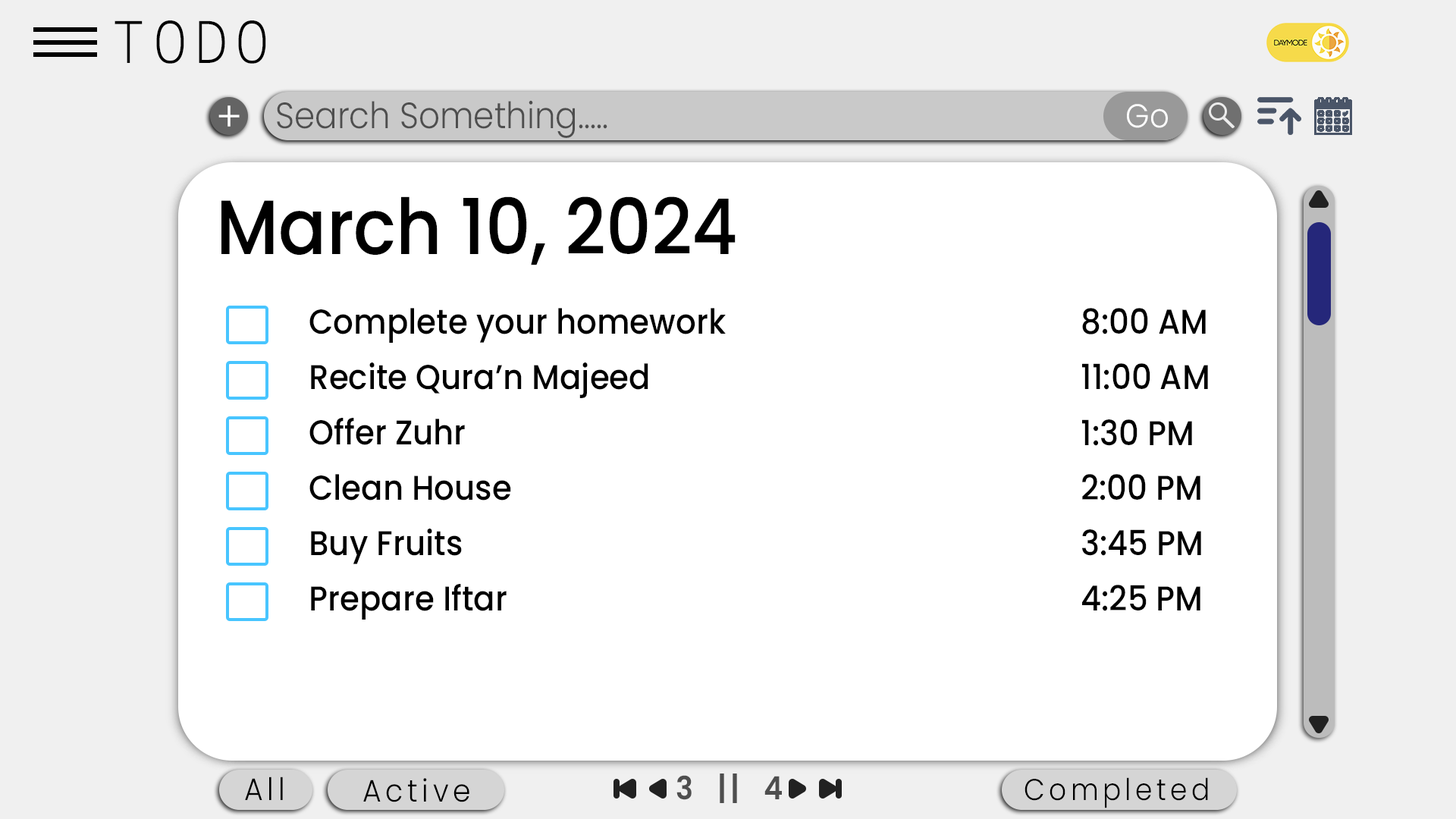
<style>
.page{position:relative;width:1456px;height:819px;background:#ffffff}
.page>*{position:absolute;margin:0}
.t1{font:60.4px "CascadiaMonoRoman_250.000wght";letter-spacing:0.16em;color:#000000;scale:0.92 1}
.t2{font:36.5px "Poppins-Light";color:#4e4e4e;scale:0.91 1}
.t3{font:40.8px "Poppins-Light";color:#ffffff;scale:0.97 1}
.t4{font:33.1px "Poppins-Light";color:#ffffff;scale:0.92 1}
.t5{font:76.9px "Poppins-Medium";color:#000000;scale:0.92 1}
.t6{font:34.5px "Poppins-Medium";color:#000000;scale:0.92 1}
.t7{font:31.8px "Poppins-SemiBold";letter-spacing:0.12em;color:#4e4e4e;scale:0.91 1}
.t8{font:31.1px "Poppins-Light";letter-spacing:0.15em;color:#000000;scale:0.92 1}
.t9{font:30px "Poppins-Light";letter-spacing:0.15em;color:#000000;scale:0.91 1}
</style>
<div class="page">
<p class="t1" style="left:115px;top:20px;width:151px;height:44px">TODO</p>
<p class="t1" style="left:115px;top:20px;width:151px;height:44px">TODO</p>
<p class="t1" style="left:115px;top:20px;width:151px;height:44px">TODO</p>
<p class="t2" style="left:277px;top:100px;width:330px;height:38px">Search Something.....</p>
<p class="t2" style="left:277px;top:100px;width:330px;height:38px">Search Something.....</p>
<p class="t3" style="left:218px;top:105px;width:22px;height:22px">+</p>
<p class="t3" style="left:218px;top:105px;width:22px;height:22px">+</p>
<p class="t3" style="left:218px;top:105px;width:22px;height:22px">+</p>
<p class="t4" style="left:1127px;top:104px;width:41px;height:24px">Go</p>
<p class="t4" style="left:1127px;top:104px;width:41px;height:24px">Go</p>
<p class="t5" style="left:221px;top:196px;width:515px;height:69px">March 10, 2024</p>
<p class="t6" style="left:309px;top:308px;width:417px;height:35px">Complete your homework</p>
<p class="t6" style="left:309px;top:308px;width:417px;height:35px">Complete your homework</p>
<p class="t6" style="left:309px;top:308px;width:417px;height:35px">Complete your homework</p>
<p class="t6" style="left:1082px;top:308px;width:124px;height:26px">8:00 AM</p>
<p class="t6" style="left:1082px;top:308px;width:124px;height:26px">8:00 AM</p>
<p class="t6" style="left:1082px;top:308px;width:124px;height:26px">8:00 AM</p>
<p class="t6" style="left:311px;top:362px;width:337px;height:36px">Recite Qura’n Majeed</p>
<p class="t6" style="left:311px;top:362px;width:337px;height:36px">Recite Qura’n Majeed</p>
<p class="t6" style="left:311px;top:362px;width:337px;height:36px">Recite Qura’n Majeed</p>
<p class="t6" style="left:1082px;top:363px;width:126px;height:27px">11:00 AM</p>
<p class="t6" style="left:1082px;top:363px;width:126px;height:27px">11:00 AM</p>
<p class="t6" style="left:1082px;top:363px;width:126px;height:27px">11:00 AM</p>
<p class="t6" style="left:309px;top:418px;width:156px;height:27px">Offer Zuhr</p>
<p class="t6" style="left:309px;top:418px;width:156px;height:27px">Offer Zuhr</p>
<p class="t6" style="left:309px;top:418px;width:156px;height:27px">Offer Zuhr</p>
<p class="t6" style="left:1082px;top:419px;width:110px;height:27px">1:30 PM</p>
<p class="t6" style="left:1082px;top:419px;width:110px;height:27px">1:30 PM</p>
<p class="t6" style="left:1082px;top:419px;width:110px;height:27px">1:30 PM</p>
<p class="t6" style="left:309px;top:474px;width:202px;height:26px">Clean House</p>
<p class="t6" style="left:309px;top:474px;width:202px;height:26px">Clean House</p>
<p class="t6" style="left:309px;top:474px;width:202px;height:26px">Clean House</p>
<p class="t6" style="left:1082px;top:474px;width:118px;height:26px">2:00 PM</p>
<p class="t6" style="left:1082px;top:474px;width:118px;height:26px">2:00 PM</p>
<p class="t6" style="left:1082px;top:474px;width:118px;height:26px">2:00 PM</p>
<p class="t6" style="left:311px;top:529px;width:151px;height:35px">Buy Fruits</p>
<p class="t6" style="left:311px;top:529px;width:151px;height:35px">Buy Fruits</p>
<p class="t6" style="left:311px;top:529px;width:151px;height:35px">Buy Fruits</p>
<p class="t6" style="left:1082px;top:529px;width:119px;height:27px">3:45 PM</p>
<p class="t6" style="left:1082px;top:529px;width:119px;height:27px">3:45 PM</p>
<p class="t6" style="left:1082px;top:529px;width:119px;height:27px">3:45 PM</p>
<p class="t6" style="left:311px;top:584px;width:196px;height:36px">Prepare Iftar</p>
<p class="t6" style="left:311px;top:584px;width:196px;height:36px">Prepare Iftar</p>
<p class="t6" style="left:311px;top:584px;width:196px;height:36px">Prepare Iftar</p>
<p class="t6" style="left:1082px;top:585px;width:118px;height:26px">4:25 PM</p>
<p class="t6" style="left:1082px;top:585px;width:118px;height:26px">4:25 PM</p>
<p class="t6" style="left:1082px;top:585px;width:118px;height:26px">4:25 PM</p>
<p class="t7" style="left:676px;top:773px;width:103px;height:30px">2  ||  3</p>
<p class="t7" style="left:676px;top:773px;width:106px;height:30px">3  ||  4</p>
<p class="t8" style="left:245px;top:777px;width:38px;height:23px">All</p>
<p class="t8" style="left:245px;top:777px;width:38px;height:23px">All</p>
<p class="t8" style="left:245px;top:777px;width:38px;height:23px">All</p>
<p class="t8" style="left:363px;top:778px;width:106px;height:24px">Active</p>
<p class="t8" style="left:363px;top:778px;width:106px;height:24px">Active</p>
<p class="t8" style="left:363px;top:778px;width:106px;height:24px">Active</p>
<p class="t9" style="left:1024px;top:777px;width:184px;height:31px">Completed</p>
<p class="t9" style="left:1024px;top:777px;width:184px;height:31px">Completed</p>
<p class="t9" style="left:1024px;top:777px;width:184px;height:31px">Completed</p>
</div>
